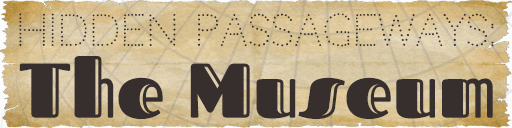
<style>
.page{position:relative;width:512px;height:128px}
.page>*{position:absolute;margin:0}
.t1{font:42.8px "Codystar";color:#362f2d;scale:0.95 1}
.t2{font:77.2px "FascinateInline-Regular";color:#362f2d}
</style>
<div class="page">
<p class="t1" style="left:19px;top:13px;width:475px;height:34px">Hidden Passageways:</p>
<p class="t2" style="left:19px;top:56px;width:474px;height:63px">The Museum</p>
</div>
